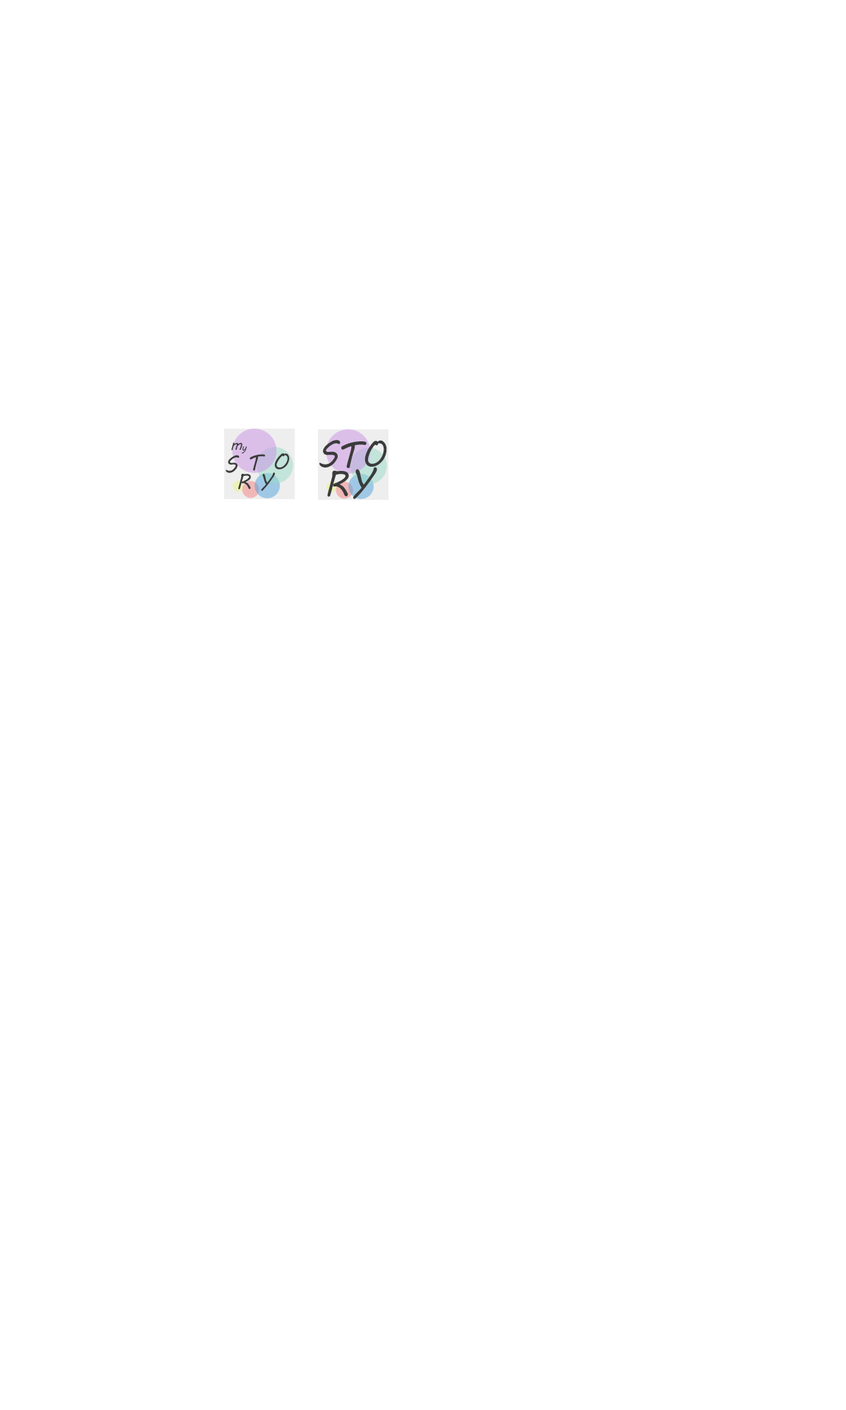
<style>
.page{position:relative;width:846px;height:1410px;background:#ffffff}
.page>*{position:absolute;margin:0}
.t1{font:14.3px "MVBoli";letter-spacing:0.1em;color:#3b3b3b}
.t2{font:10.1px "MVBoli";letter-spacing:0.1em;color:#3b3b3b}
.t3{font:34.6px "MVBoli";letter-spacing:0.1em;color:#3b3b3b}
.t4{font:37.1px "MVBoli";letter-spacing:0.1em;color:#3b3b3b}
.t5{font:35.4px "MVBoli";letter-spacing:0.1em;color:#3b3b3b}
.t6{font:22.2px "MVBoli";letter-spacing:0.1em;color:#3b3b3b}
.t7{font:22.3px "MVBoli";letter-spacing:0.1em;color:#3b3b3b}
.t8{font:22.4px "MVBoli";letter-spacing:0.1em;color:#3b3b3b}
.t9{font:21.4px "MVBoli";letter-spacing:0.1em;color:#3b3b3b}
.t10{font:20.3px "MVBoli";letter-spacing:0.1em;color:#3b3b3b}
.t11{font:34.8px "MVBoli";letter-spacing:0.1em;color:#3b3b3b}
.t12{font:35.2px "MVBoli";letter-spacing:0.1em;color:#3b3b3b}
</style>
<div class="page">
<p class="t1" style="left:231px;top:442px;width:11px;height:8px">m</p>
<p class="t2" style="left:242px;top:446px;width:5px;height:8px">y</p>
<p class="t3" style="left:319px;top:440px;width:21px;height:28px;rotate:-1deg">S</p>
<p class="t4" style="left:341px;top:441px;width:26px;height:27px">T</p>
<p class="t5" style="left:364px;top:440px;width:23px;height:27px;rotate:-8deg">O</p>
<p class="t6" style="left:226px;top:455px;width:14px;height:18px">S</p>
<p class="t7" style="left:250px;top:454px;width:15px;height:17px">T</p>
<p class="t8" style="left:274px;top:453px;width:16px;height:16px">O</p>
<p class="t9" style="left:238px;top:474px;width:13px;height:15px">R</p>
<p class="t10" style="left:261px;top:472px;width:14px;height:19px">Y</p>
<p class="t11" style="left:327px;top:470px;width:22px;height:27px">R</p>
<p class="t12" style="left:353px;top:467px;width:24px;height:32px">Y</p>
</div>
